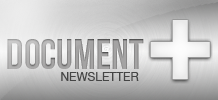
<style>
.page{position:relative;width:218px;height:100px}
.page>*{position:absolute;margin:0}
.t1{font:125px "Impact";color:#fefefe}
.t2{font:42px "BebasNeue";color:#a4a3a3}
.t3{font:12px "HelveticaNeue";color:#454545}
</style>
<div class="page">
<p class="t1" style="left:150px;top:20px;width:60px;height:59px">+</p>
<p class="t2" style="left:7px;top:39px;width:137px;height:30px">DOCUMENT</p>
<p class="t3" style="left:61px;top:72px;width:78px;height:9px">NEWSLETTER</p>
</div>
